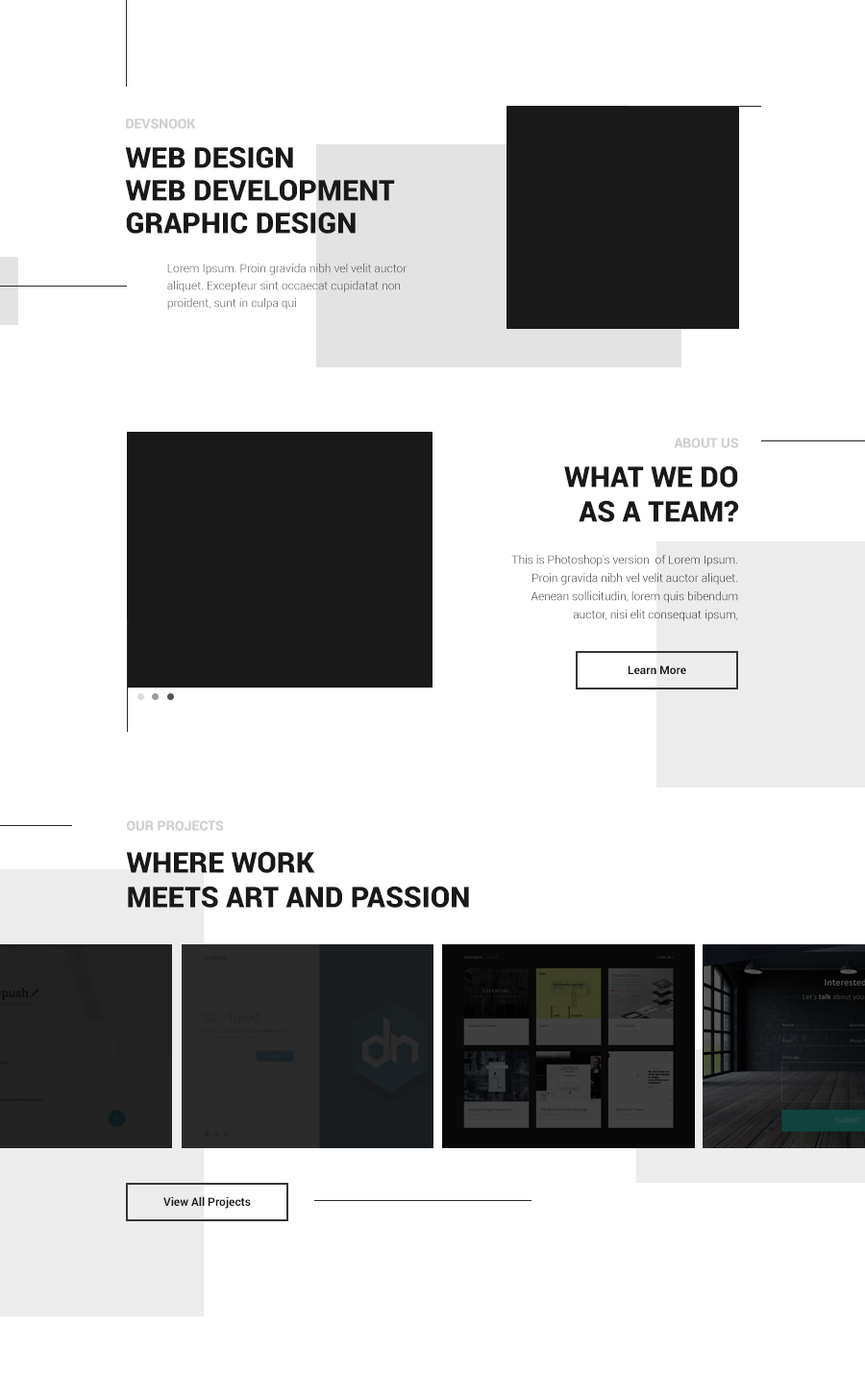
<style>
.page{position:relative;width:865px;height:1378px;background:#ffffff}
.page>*{position:absolute;margin:0}
.t1{font:13.5px "Roboto-Black";color:#d0d0d0;text-transform:uppercase}
.t2{font:28.8px "Roboto-Black";color:#191919;text-transform:uppercase}
.t3{font:11.5px/17.3px "Roboto-Light"}
.t4{font:28.8px/34.6px "Roboto-Black";color:#191919;text-transform:uppercase}
.t5{font:11.5px/18.3px "Roboto-Light"}
.t6{font:11.5px "Roboto-Bold";color:#191919}
</style>
<div class="page">
<p class="t1" style="left:126px;top:118px;width:70px;height:11px">DEVSNOOK</p>
<p class="t2" style="left:125px;top:146px;width:168px;height:22px">WEB DESIGN</p>
<p class="t2" style="left:125px;top:179px;width:270px;height:22px">WEB DEVELOPMENT</p>
<p class="t2" style="left:126px;top:212px;width:230px;height:22px">GRAPHIC DESIGN</p>
<p class="t3" style="left:167px;top:263px;width:241px;height:47px">Lorem Ipsum. Proin gravida nibh vel velit auctor aliquet. Excepteur sint occaecat cupidatat non proident, sunt in culpa qui</p>
<p class="t1" style="left:674px;top:438px;width:65px;height:10px">ABOUT US</p>
<p class="t4" style="left:564px;top:465px;width:175px;height:57px;text-align:right">WHAT WE DO<br>AS a team?</p>
<p class="t5" style="left:512px;top:555px;width:226px;height:66px;text-align:right">This is Photoshop's version  of Lorem Ipsum. Proin gravida nibh vel velit auctor aliquet. Aenean sollicitudin, lorem quis bibendum auctor, nisi elit consequat ipsum,</p>
<p class="t6" style="left:628px;top:665px;width:59px;height:9px">Learn More</p>
<p class="t1" style="left:127px;top:820px;width:97px;height:11px">OUR PROJECTS</p>
<p class="t4" style="left:126px;top:851px;width:343px;height:57px">WHERE WORK <br>MEETS ART AND PASSION</p>
<p class="t6" style="left:163px;top:1196px;width:88px;height:13px">View All Projects</p>
</div>
